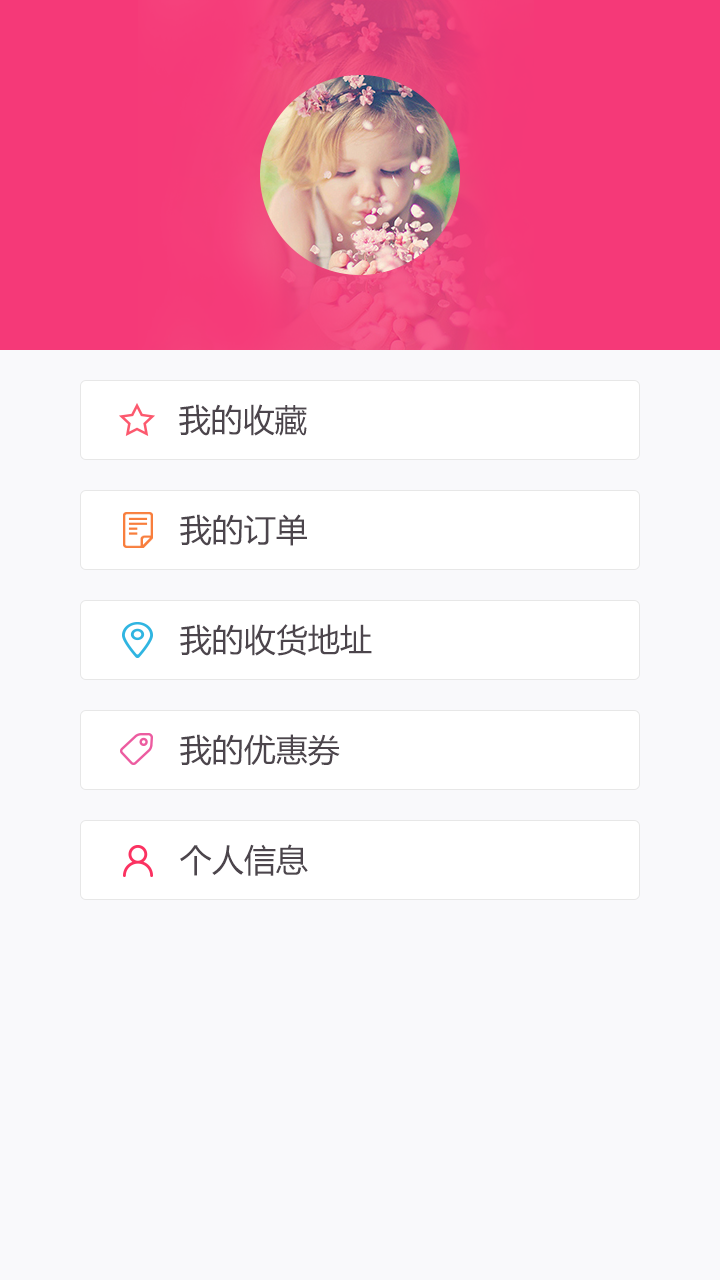
<style>
.page{position:relative;width:720px;height:1280px;background:#f9f9fb}
.page>*{position:absolute;margin:0}
.t1{font:32px "MicrosoftYaHei";color:#4c454c}
</style>
<div class="page">
<p class="t1" style="left:179px;top:404px;width:128px;height:32px">我的收藏</p>
<p class="t1" style="left:180px;top:514px;width:127px;height:32px">我的订单</p>
<p class="t1" style="left:180px;top:624px;width:192px;height:32px">我的收货地址</p>
<p class="t1" style="left:180px;top:734px;width:160px;height:32px">我的优惠券</p>
<p class="t1" style="left:180px;top:844px;width:128px;height:32px">个人信息</p>
</div>
